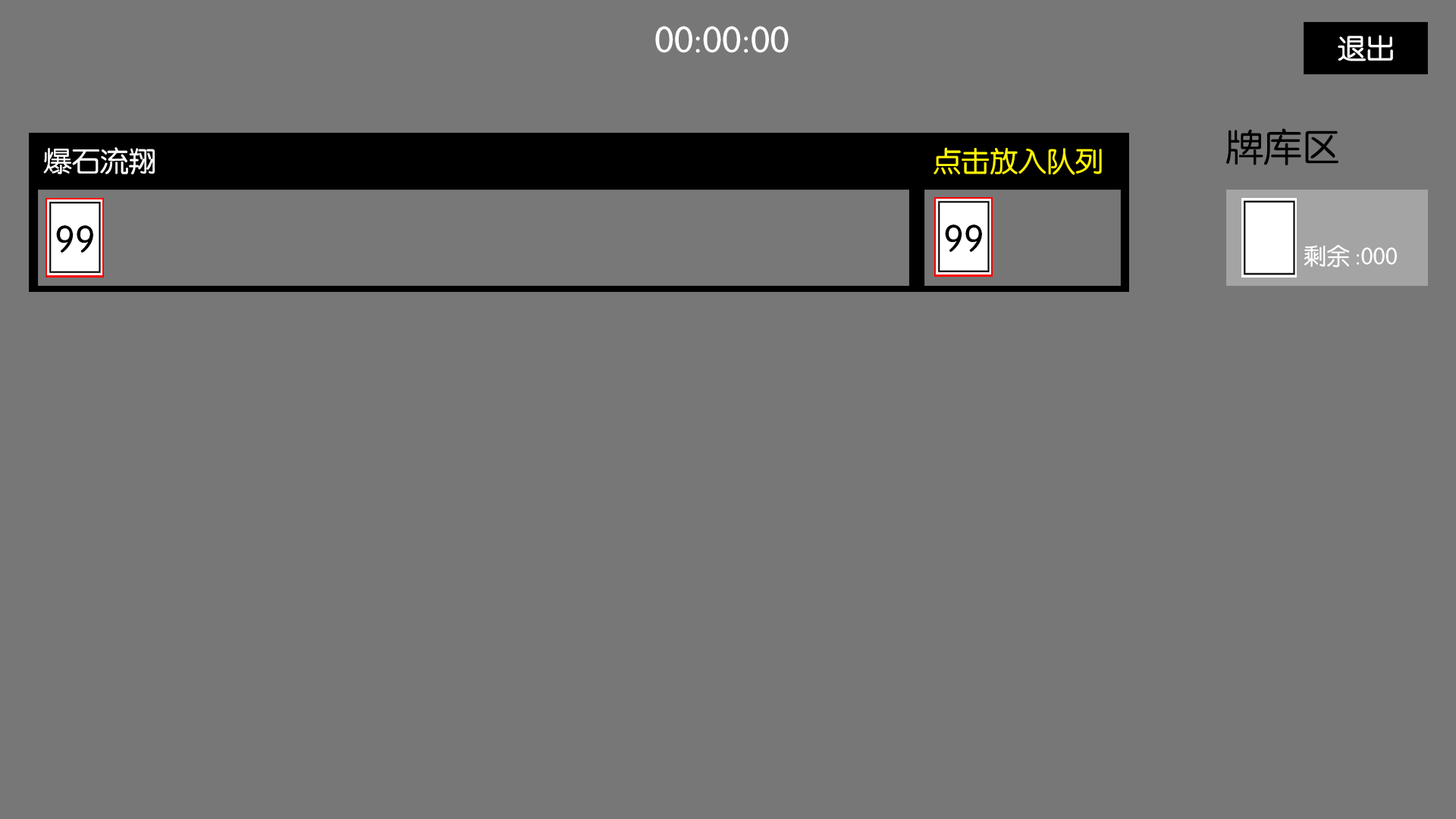
<style>
.page{position:relative;width:1456px;height:819px;background:#777777}
.page>*{position:absolute;margin:0}
.t1{font:36.6px "FZY3K--GBK1-0";color:#ffffff}
.t2{font:28.4px "FZY3K--GBK1-0";color:#fefefe}
.t3{font:37.9px "FZY3K--GBK1-0";color:#010101}
.t4{font:28.3px "FZY3K--GBK1-0";color:#fefefe}
.t5{font:28.4px "FZY3K--GBK1-0";color:#fff600}
.t6{font:37.9px "FZY3K--GBK1-0";color:#000000}
.t7{font:23.7px "FZY3K--GBK1-0";color:#fefefe;scale:0.97 1}
</style>
<div class="page">
<p class="t1" style="left:655px;top:26px;width:134px;height:27px">00:00:00</p>
<p class="t2" style="left:1338px;top:35px;width:55px;height:26px">退出</p>
<p class="t3" style="left:1226px;top:128px;width:112px;height:37px">牌库区</p>
<p class="t4" style="left:43px;top:147px;width:112px;height:27px">爆石流翔</p>
<p class="t5" style="left:933px;top:147px;width:169px;height:28px">点击放入队列</p>
<p class="t6" style="left:56px;top:225px;width:37px;height:28px">99</p>
<p class="t6" style="left:945px;top:224px;width:37px;height:28px">99</p>
<p class="t7" style="left:1304px;top:245px;width:93px;height:23px">剩余:000</p>
</div>
